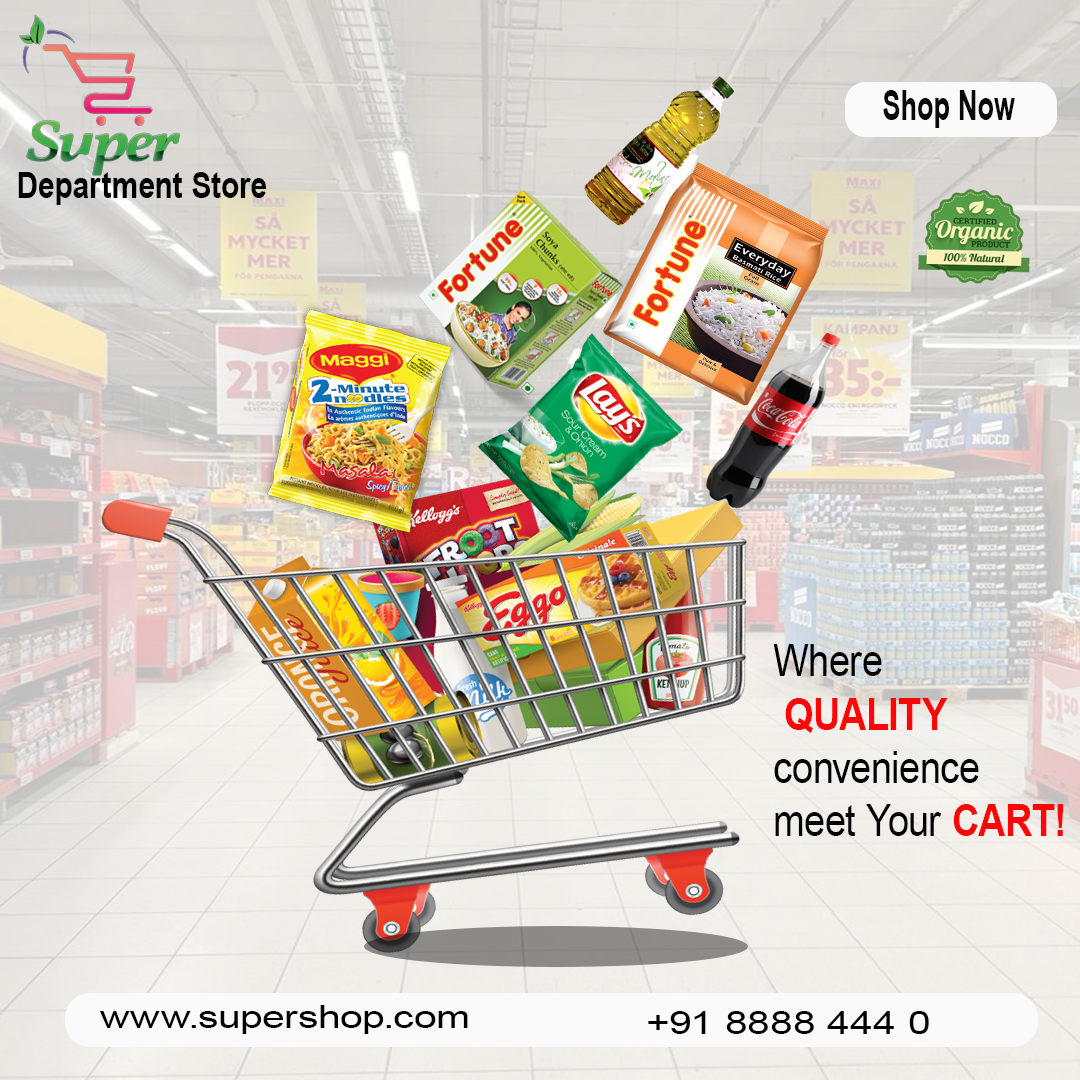
<style>
.page{position:relative;width:1080px;height:1080px}
.page>*{position:absolute;margin:0}
.t1{font:41.3px "Arial-BoldMT";letter-spacing:0.01em;color:#080808;scale:0.66 1}
.t2{font:35.5px "Arial-BoldMT";letter-spacing:0.01em;color:#000000;scale:0.84 1}
.t3{font:44.4px "ArialMT";letter-spacing:0.01em;color:#000000;scale:0.85 1}
.t4{font:44.4px "Arial-BoldMT";letter-spacing:0.01em;color:#ff0606;scale:0.85 1}
.t5{font:44.4px "ArialMT";letter-spacing:0.01em;color:#040404;scale:0.85 1}
.t6{font:44.4px "Arial-BoldMT";letter-spacing:0.01em;color:#fb0707;scale:0.85 1}
.t7{font:32.3px "ArialMT";letter-spacing:0.01em;color:#000000;scale:1.26 1}
</style>
<div class="page">
<p class="t1" style="left:883px;top:90px;width:132px;height:38px">Shop Now</p>
<p class="t2" style="left:18px;top:172px;width:248px;height:33px">Department Store</p>
<p class="t3" style="left:773px;top:644px;width:291px;height:192px">Where <br> <span class="t4">QUALITY<br></span>convenience <br><span class="t5">meet Your </span><span class="t6">CART!</span></p>
<p class="t7" style="left:100px;top:1005px;width:368px;height:29px">www.supershop.com</p>
<p class="t7" style="left:648px;top:1011px;width:281px;height:23px">+91 8888 444 0</p>
</div>
